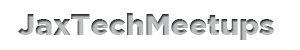
<style>
.page{position:relative;width:300px;height:50px;background:#ffffff}
.page>*{position:absolute;margin:0}
.t1{font:30px "GothamBlack"}
</style>
<div class="page">
<p class="t1" style="left:18px;top:13px;width:256px;height:27px">JaxTechMeetups</p>
</div>
